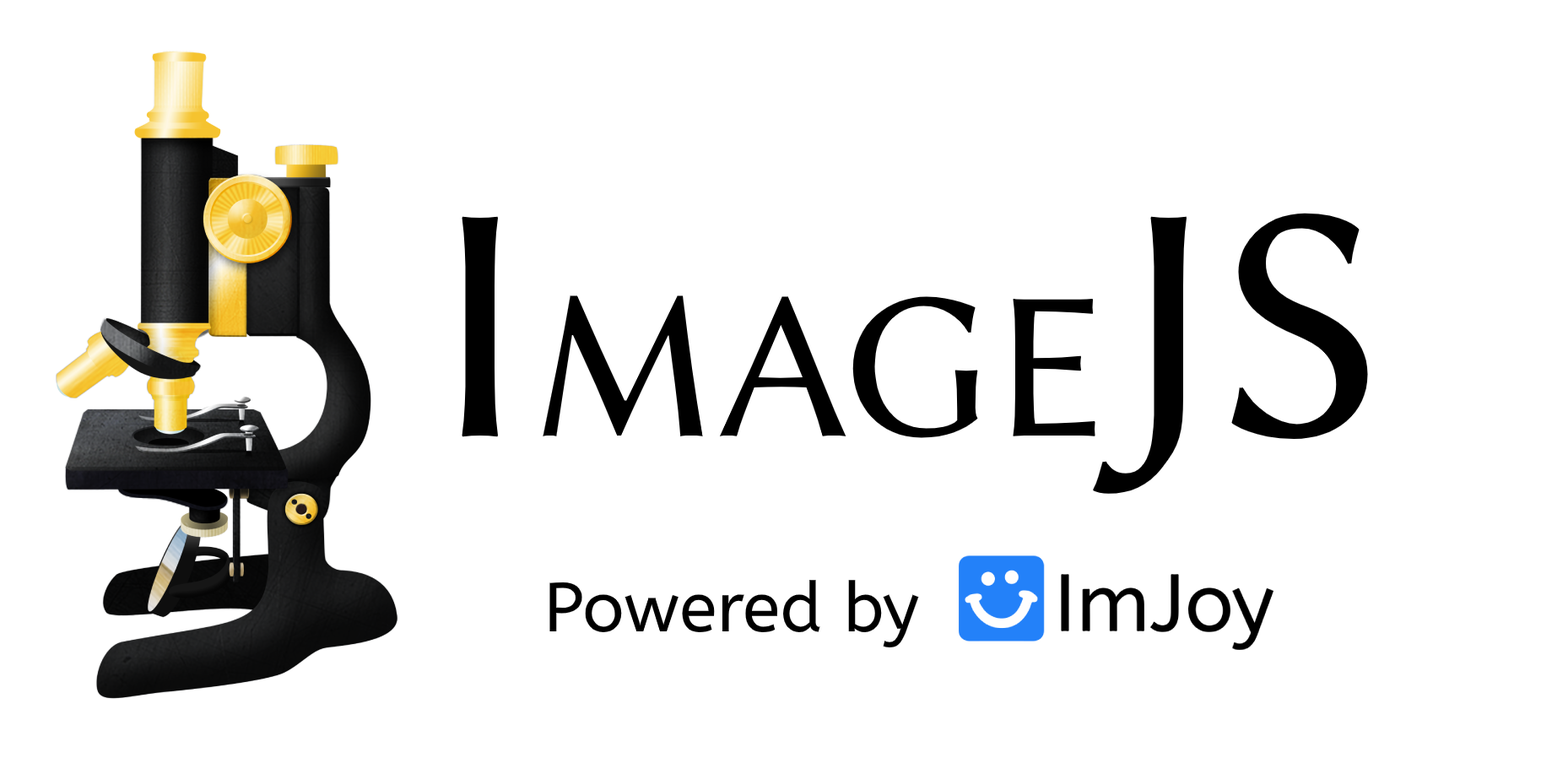
<style>
.page{position:relative;width:1541px;height:774px;background:#ffffff}
.page>*{position:absolute;margin:0}
.t1{font:211px "LinBiolinumO";color:#000000}
.t2{font:337.6px "LinBiolinumO";color:#000000}
.t3{font:69.2px "ABeeZee-Regular";color:#000000}
</style>
<div class="page">
<p class="t1" style="left:462px;top:213px;width:906px;height:281px"><span class="t2">I</span>MAGE<span class="t2">JS</span></p>
<p class="t3" style="left:549px;top:580px;width:370px;height:68px">Powered by</p>
</div>
